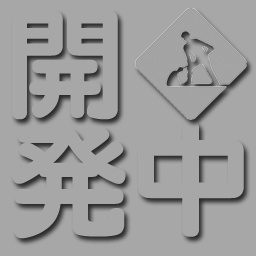
<style>
.page{position:relative;width:256px;height:256px;background:#a7a7a7}
.page>*{position:absolute;margin:0}
.t1{font:120px "FGPMaruGothicCa-U";color:#a7a7a7}
</style>
<div class="page">
<p class="t1" style="left:12px;top:10px;width:106px;height:110px">開</p>
<p class="t1" style="left:11px;top:127px;width:115px;height:112px">発</p>
</div>
